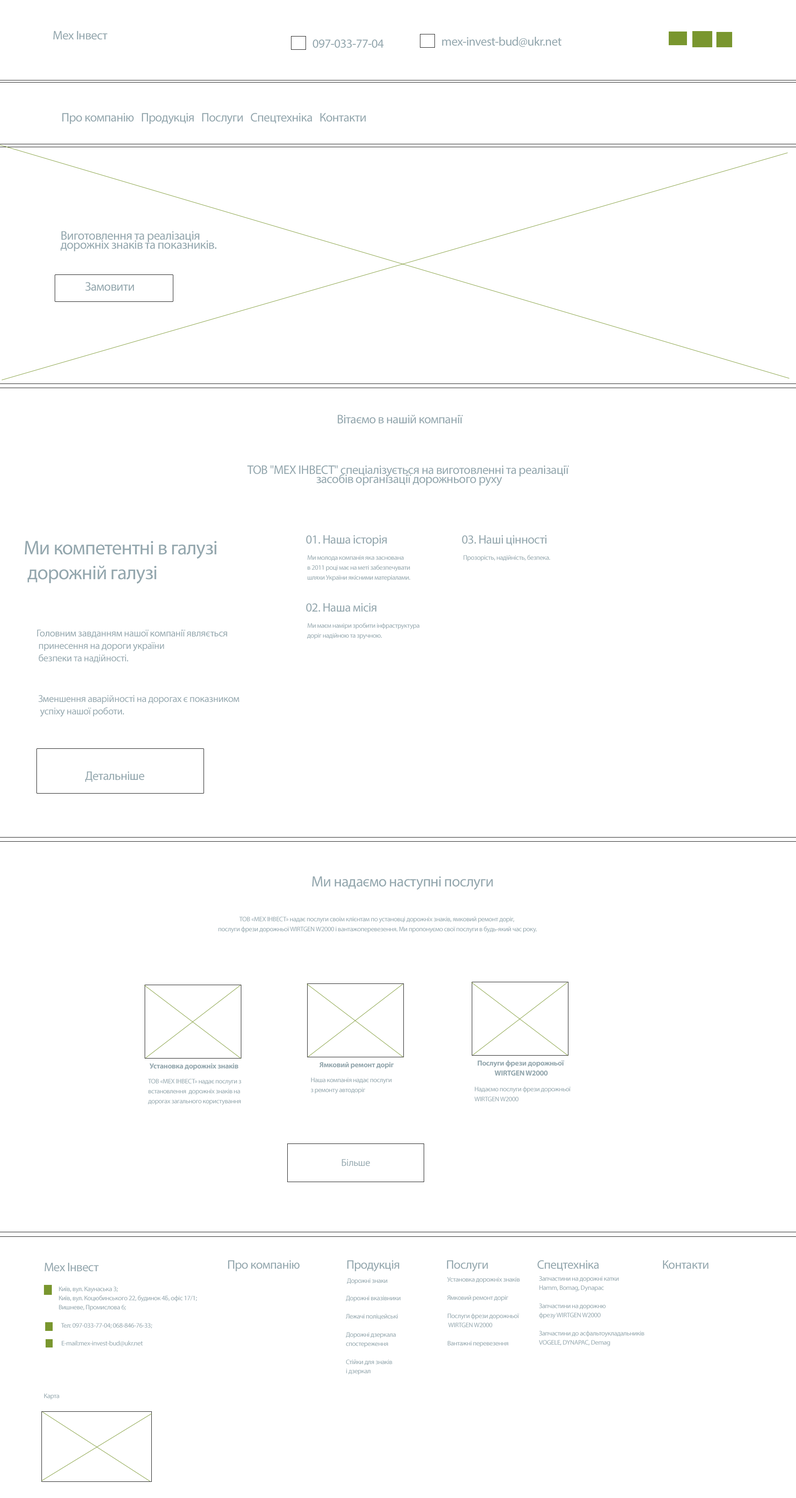
<style>
.page{position:relative;width:796px;height:1498px;background:#ffffff}
.page>*{position:absolute;margin:0}
.t1{font:12.4px "MyriadPro-Regular";letter-spacing:-0.025em;color:#94a7ae}
.t2{font:12.4px/9.1px "MyriadPro-Regular";letter-spacing:-0.025em;color:#94a7ae}
.t3{font:19.9px/24.9px "MyriadPro-Regular";letter-spacing:-0.025em;color:#94a7ae}
.t4{font:6.6px/10px "MyriadPro-Regular";letter-spacing:-0.025em;color:#94a7ae}
.t5{font:6.6px "MyriadPro-Regular";letter-spacing:-0.025em;color:#94a7ae}
.t6{font:10px/12.4px "MyriadPro-Regular";letter-spacing:-0.025em;color:#94a7ae}
.t7{font:14.9px "MyriadPro-Regular";letter-spacing:-0.025em;color:#94a7ae}
.t8{font:7.5px "MyriadPro-Bold";letter-spacing:-0.025em;color:#94a7ae}
.t9{font:7.5px/9.9px "MyriadPro-Bold";letter-spacing:-0.025em;color:#94a7ae}
.t10{font:6.6px/9.9px "MyriadPro-Regular";letter-spacing:-0.025em;color:#94a7ae}
.t11{font:10px "MyriadPro-Regular";letter-spacing:-0.025em;color:#94a7ae}
.t12{font:6.6px/9.1px "MyriadPro-Regular";letter-spacing:-0.025em;color:#94a7ae}
</style>
<div class="page">
<p class="t1" style="left:53px;top:31px;width:54px;height:9px">Мех Інвест</p>
<p class="t1" style="left:313px;top:39px;width:71px;height:9px">097-033-77-04</p>
<p class="t1" style="left:442px;top:36px;width:120px;height:11px">mex-invest-bud@ukr.net</p>
<p class="t1" style="left:62px;top:113px;width:304px;height:11px">Про компанію   Продукція   Послуги   Спецтехніка   Контакти</p>
<p class="t2" style="left:61px;top:231px;width:155px;height:20px">Виготовлення та реалізація <br>дорожніх знаків та показників.</p>
<p class="t1" style="left:85px;top:282px;width:49px;height:9px">Замовити</p>
<p class="t1" style="left:337px;top:415px;width:126px;height:9px">Вітаємо в нашій компанії</p>
<p class="t2" style="left:247px;top:465px;width:322px;height:21px;text-align:center">ТОВ "МЕХ ІНВЕСТ" спеціалізується на виготовленні та реалізації<br> засобів організації дорожнього руху</p>
<p class="t3" style="left:24px;top:541px;width:193px;height:43px">Ми компетентні в галузі<br> дорожній галузі</p>
<p class="t1" style="left:306px;top:535px;width:81px;height:11px">01. Наша історія</p>
<p class="t1" style="left:462px;top:535px;width:84px;height:11px">03. Наші цінності</p>
<p class="t4" style="left:308px;top:555px;width:102px;height:26px">Ми молода компанія яка заснована<br>в 2011 році має на меті забезпечувати<br>шляхи України якісними матеріалами.</p>
<p class="t5" style="left:464px;top:555px;width:86px;height:6px">Прозорість, надійність, безпека.</p>
<p class="t1" style="left:306px;top:603px;width:70px;height:9px">02. Наша місія</p>
<p class="t6" style="left:37px;top:629px;width:190px;height:34px">Головним завданням нашої компанії являється<br> принесення на дороги україни<br> безпеки та надійності.</p>
<p class="t4" style="left:307px;top:623px;width:113px;height:16px">Ми маєм наміри зробити інфраструктура<br>доріг надійною та зручною.</p>
<p class="t6" style="left:38px;top:695px;width:201px;height:22px">Зменшення аварійності на дорогах є показником<br> успіху нашої роботи.</p>
<p class="t1" style="left:85px;top:771px;width:59px;height:11px">Детальніше</p>
<p class="t7" style="left:312px;top:876px;width:181px;height:14px">Ми надаємо наступні послуги</p>
<p class="t4" style="left:218px;top:917px;width:319px;height:16px;text-align:center">ТОВ «МЕХ ІНВЕСТ» надає послуги своїм клієнтам по установці дорожніх знаків, ямковий ремонт доріг,<br> послуги фрези дорожньої WIRTGEN W2000 і вантажоперевезення. Ми пропонуємо свої послуги в будь-який час року.</p>
<p class="t8" style="left:319px;top:1062px;width:75px;height:7px">Ямковий ремонт доріг</p>
<p class="t9" style="left:478px;top:1060px;width:86px;height:16px;text-align:center">Послуги фрези дорожньої <br>WIRTGEN W2000</p>
<p class="t8" style="left:149px;top:1063px;width:89px;height:7px">Установка дорожніх знаків</p>
<p class="t10" style="left:148px;top:1079px;width:93px;height:26px">ТОВ «МЕХ ІНВЕСТ» надає послуги з <br>встановлення  дорожніх знаків на <br>дорогах загального користування</p>
<p class="t10" style="left:311px;top:1078px;width:81px;height:16px">Наша компанія надає послуги <br>з ремонту автодоріг</p>
<p class="t10" style="left:474px;top:1086px;width:97px;height:16px">Надаємо послуги фрези дорожньої <br>WIRTGEN W2000</p>
<p class="t11" style="left:342px;top:1159px;width:28px;height:7px">Більше</p>
<p class="t1" style="left:44px;top:1262px;width:55px;height:10px">Мех Інвест</p>
<p class="t1" style="left:228px;top:1260px;width:481px;height:12px">Про компанію                    Продукція                    Послуги                     Спецтехніка                           Контакти</p>
<p class="t12" style="left:447px;top:1277px;width:73px;height:70px">Установка дорожніх знаків<br><br>Ямковий ремонт доріг<br><br>Послуги фрези дорожньої<br> WIRTGEN W2000<br><br>Вантажні перевезення</p>
<p class="t12" style="left:539px;top:1276px;width:105px;height:70px">Запчастини на дорожні катки <br>Hamm, Bomag, Dynapac<br><br>Запчастини на дорожню <br>фрезу WIRTGEN W2000<br><br>Запчастини до асфальтоукладальників <br>VOGELE, DYNAPAC, Demag</p>
<p class="t12" style="left:59px;top:1287px;width:138px;height:24px">Київ, вул. Каунаська 3; <br>Київ, вул. Коцюбинського 22, будинок 4Б, офіс 17/1; <br>Вишневе, Промислова 6;</p>
<p class="t5" style="left:347px;top:1278px;width:40px;height:6px">Дорожні знаки</p>
<p class="t12" style="left:346px;top:1296px;width:55px;height:79px">Дорожні вказівники<br><br>Лежачі поліцейські<br><br>Дорожні дзеркала <br>спостереження<br><br>Стійки для знаків <br>і дзеркал</p>
<p class="t5" style="left:61px;top:1323px;width:91px;height:5px">Тел: 097-033-77-04; 068-846-76-33;</p>
<p class="t5" style="left:62px;top:1340px;width:81px;height:6px">E-mail:mex-invest-bud@ukr.net</p>
<p class="t5" style="left:44px;top:1393px;width:15px;height:7px">Карта</p>
</div>
